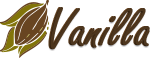
<style>
.page{position:relative;width:150px;height:58px;background:#ffffff}
.page>*{position:absolute;margin:0}
.t1{font:60px "FreestyleScript-Regular";color:#4b341a}
.t2{font:60px "FreestyleScript-Regular";color:#4d361e}
</style>
<div class="page">
<p class="t1" style="left:48px;top:7px;width:100px;height:42px">Vanilla</p>
<p class="t2" style="left:50px;top:7px;width:100px;height:42px">Vanilla</p>
</div>
